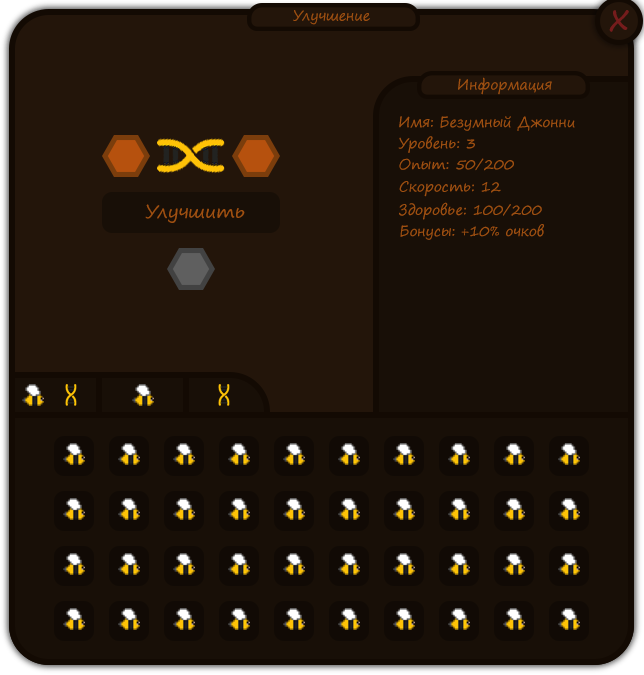
<style>
.page{position:relative;width:644px;height:675px;background:#180f07}
.page>*{position:absolute;margin:0}
.t1{font:14px "SegoePrint";color:#9f5011}
.t2{font:36px "SegoePrint";color:#751c1c}
.t3{font:18px "SegoePrint";color:#9f5011}
</style>
<div class="page">
<p class="t1" style="left:293px;top:10px;width:77px;height:15px">Улучшение</p>
<p class="t2" style="left:609px;top:10px;width:20px;height:22px">x</p>
<p class="t1" style="left:458px;top:77px;width:94px;height:18px">Информация</p>
<p class="t1" style="left:399px;top:116px;width:176px;height:15px">Имя: Безумный Джонни</p>
<p class="t1" style="left:398px;top:136px;width:77px;height:17px">Уровень: 3</p>
<p class="t1" style="left:399px;top:158px;width:115px;height:13px">Опыт: 50/200</p>
<p class="t1" style="left:399px;top:181px;width:102px;height:16px">Скорость: 12</p>
<p class="t3" style="left:145px;top:204px;width:100px;height:19px">Улучшить</p>
<p class="t1" style="left:399px;top:202px;width:143px;height:18px">Здоровье: 100/200</p>
<p class="t1" style="left:400px;top:224px;width:144px;height:16px">Бонусы: +10% очков</p>
</div>
